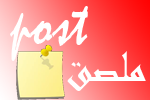
<style>
.page{position:relative;width:150px;height:100px}
.page>*{position:absolute;margin:0}
.t1{font:66.7px "Mistral";color:#ffffff;scale:0.9 1}
.t2{font:66.7px "Mistral";color:#ff0000;scale:0.9 1}
.t3{font:48px "Andalus";color:#ffffff}
</style>
<div class="page">
<p class="t1" style="left:10px;top:6px;width:78px;height:55px;text-align:justify">post<br><span class="t2"><br>ال</span></p>
<p class="t3" style="left:67px;top:51px;width:79px;height:40px">ملصق</p>
</div>
